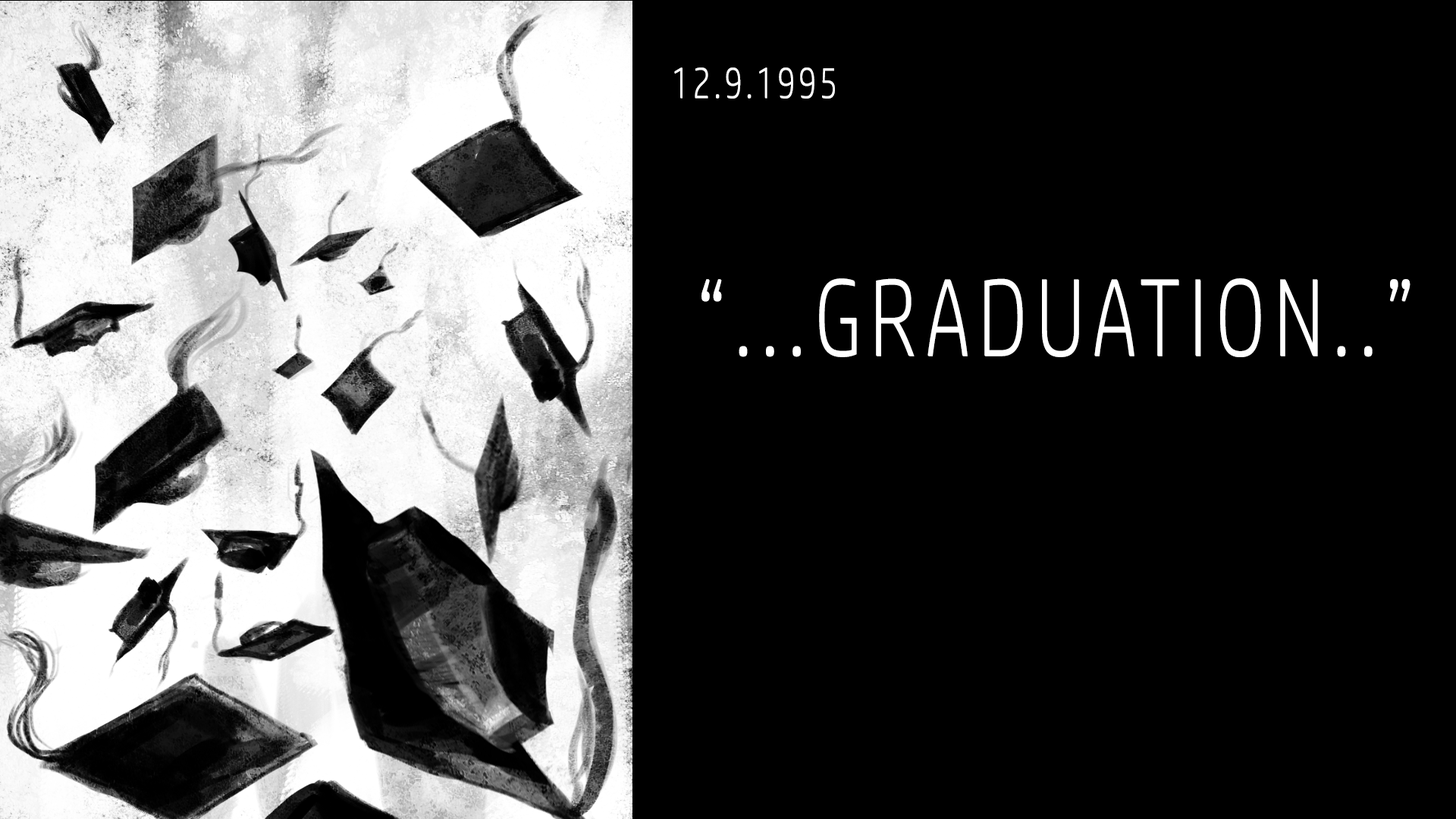
<style>
.page{position:relative;width:1456px;height:819px;background:#000000}
.page>*{position:absolute;margin:0}
.t1{font:189.6px "HPSimplified-Light";letter-spacing:0.1em;color:#ffffff;scale:0.75 1}
.t2{font:18.2px "HPSimplified-Light";letter-spacing:0.1em;color:#ffffff;scale:0.75 1}
</style>
<div class="page">
<p class="t1" style="left:674px;top:67px;width:736px;height:290px"><span class="t2">12.9.1995 <br><br><br>    <br><br></span> “...GRADUATION..”</p>
</div>
